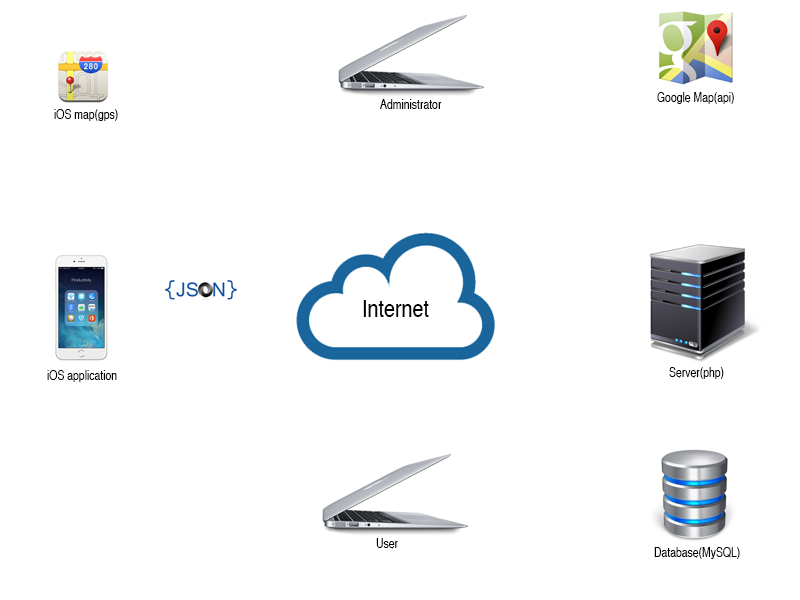
<style>
.page{position:relative;width:800px;height:600px;background:#ffffff}
.page>*{position:absolute;margin:0}
.t1{font:12.5px "Helvetica";color:#000000;scale:0.83 1}
.t2{font:23.9px "Helvetica";color:#000000;scale:0.83 1}
</style>
<div class="page">
<p class="t1" style="left:380px;top:99px;width:62px;height:10px">Administrator</p>
<p class="t1" style="left:657px;top:92px;width:77px;height:12px">Google Map(api)</p>
<p class="t1" style="left:54px;top:109px;width:64px;height:12px">iOS map(gps)</p>
<p class="t2" style="left:363px;top:300px;width:66px;height:17px">Internet</p>
<p class="t1" style="left:47px;top:370px;width:70px;height:12px">iOS application</p>
<p class="t1" style="left:669px;top:367px;width:55px;height:12px">Server(php)</p>
<p class="t1" style="left:376px;top:538px;width:22px;height:11px">User</p>
<p class="t1" style="left:654px;top:547px;width:86px;height:12px">Database(MySQL)</p>
</div>
